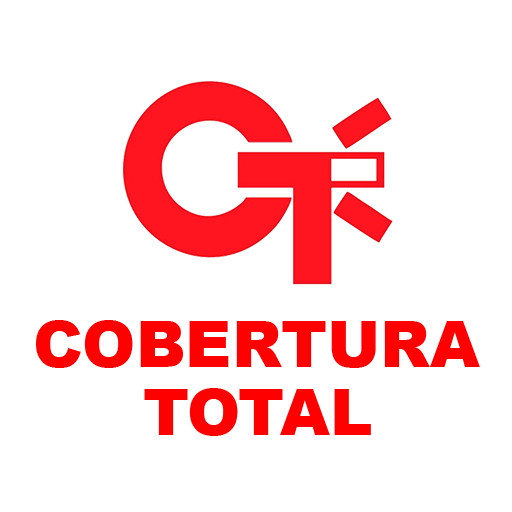
<style>
.page{position:relative;width:512px;height:512px;background:#ffffff}
.page>*{position:absolute;margin:0}
.t1{font:64px "Arial-Black";color:#ff0000}
</style>
<div class="page">
<p class="t1" style="left:36px;top:320px;width:444px;height:48px">COBERTURA</p>
<p class="t1" style="left:144px;top:388px;width:227px;height:48px">TOTAL</p>
</div>
